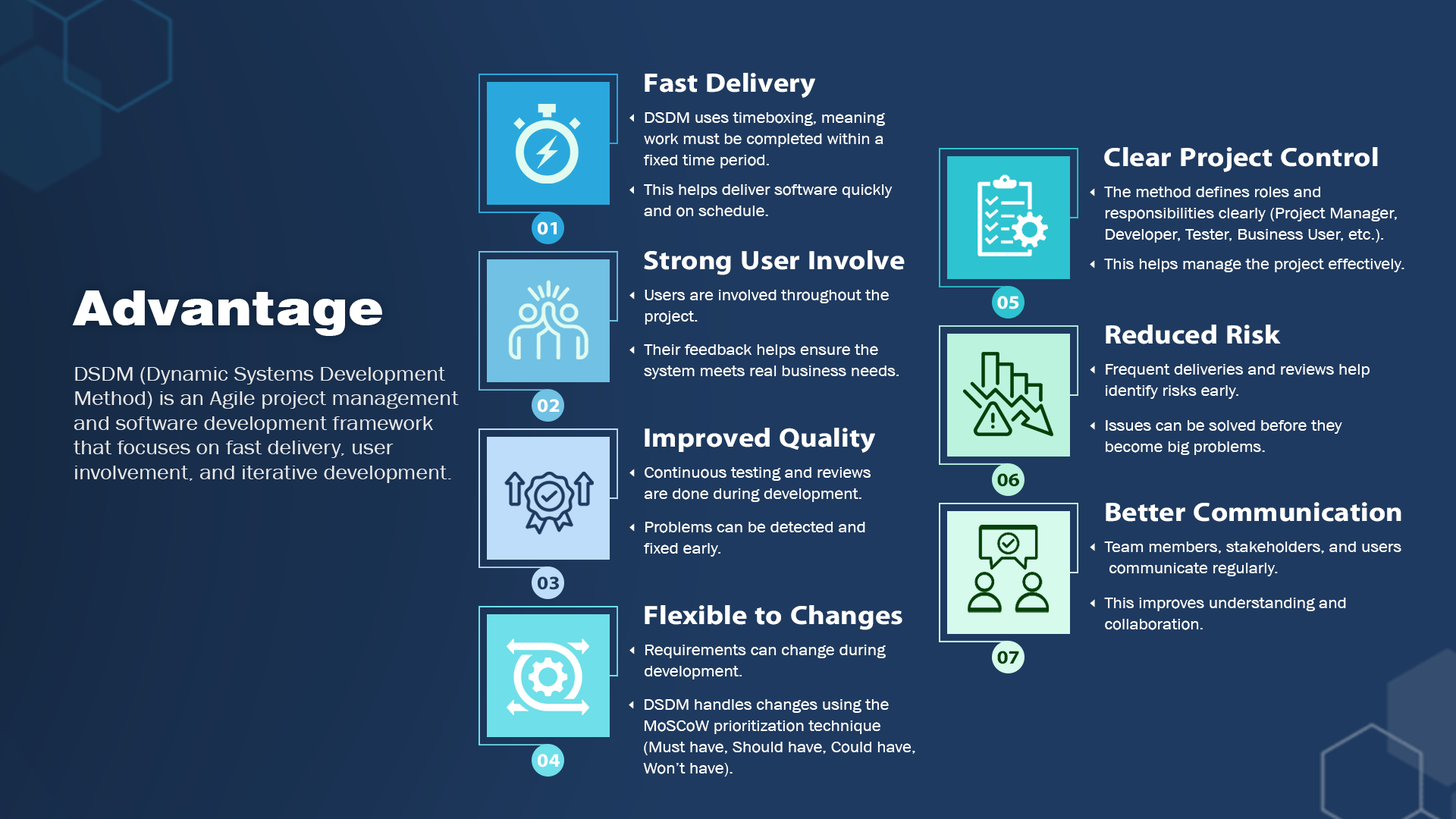
<style>
.page{position:relative;width:1456px;height:819px;background:#1e3a60}
.page>*{position:absolute;margin:0}
.t1{font:26.7px "iKampuchea001_O'Chrov";color:#ffffff;scale:1.1 1}
.t2{font:15.6px/21.2px "AA-Khmer-AngDaunPov";color:#ffffff;scale:1.1 1}
.t3{font:26.8px "iKampuchea001_O'Chrov";color:#ffffff;scale:1.1 1}
.t4{font:15.7px/21.3px "AA-Khmer-AngDaunPov";color:#ffffff;scale:1.1 1}
.t5{font:18.9px "iKampuchea001_O'Chrov";color:#ffffff;scale:1.1 1}
.t6{font:15.7px "AA-Khmer-AngDaunPov";color:#ffffff;scale:1.1 1}
.t7{font:48.5px "Swiss721BT-Black";color:#ffffff;scale:1.1 1}
.t8{font:20.5px "AA-Khmer-AngDaunPov";color:#ffffff;scale:1.1 1}
.t9{font:18.9px "iKampuchea001_O'Chrov";color:#063f09;scale:1.1 1}
.t10{font:18.9px "iKampuchea001_O'Chrov";color:#1e3a60;scale:1.1 1}
</style>
<div class="page">
<p class="t1" style="left:645px;top:73px;width:170px;height:25px">Fast Delivery</p>
<p class="t2" style="left:644px;top:112px;width:241px;height:56px">DSDM uses timeboxing, meaning <br>work must be completed within a <br>fixed time period.</p>
<p class="t3" style="left:1104px;top:147px;width:274px;height:25px">Clear Project Control</p>
<p class="t2" style="left:644px;top:184px;width:249px;height:33px">This helps deliver software quickly <br>and on schedule.</p>
<p class="t4" style="left:1104px;top:187px;width:293px;height:56px">The method defines roles and <br>responsibilities clearly (Project Manager, <br>Developer, Tester, Business User, etc.).</p>
<p class="t5" style="left:538px;top:221px;width:19px;height:14px">01</p>
<p class="t3" style="left:644px;top:250px;width:261px;height:25px">Strong User Involve</p>
<p class="t6" style="left:1104px;top:259px;width:300px;height:13px">This helps manage the project effectively.</p>
<p class="t7" style="left:72px;top:290px;width:310px;height:46px">Advantage</p>
<p class="t4" style="left:645px;top:290px;width:244px;height:35px">Users are involved throughout the <br>project.</p>
<p class="t5" style="left:997px;top:296px;width:22px;height:13px">05</p>
<p class="t3" style="left:1106px;top:325px;width:175px;height:19px">Reduced Risk</p>
<p class="t4" style="left:644px;top:344px;width:255px;height:35px">Their feedback helps ensure the <br>system meets real business needs.</p>
<p class="t4" style="left:1106px;top:364px;width:264px;height:35px">Frequent deliveries and reviews help <br>identify risks early.</p>
<p class="t8" style="left:74px;top:367px;width:385px;height:116px;opacity:0.86">DSDM (Dynamic Systems Development <br>Method) is an Agile project management <br>and software development framework <br>that focuses on fast delivery, user <br>involvement, and iterative development.</p>
<p class="t5" style="left:538px;top:399px;width:22px;height:14px">02</p>
<p class="t4" style="left:1106px;top:420px;width:236px;height:35px">Issues can be solved before they <br>become big problems.</p>
<p class="t3" style="left:645px;top:428px;width:230px;height:25px">Improved Quality</p>
<p class="t4" style="left:644px;top:467px;width:227px;height:35px">Continuous testing and reviews <br>are done during development.</p>
<p class="t9" style="left:997px;top:473px;width:22px;height:14px">06</p>
<p class="t3" style="left:1106px;top:502px;width:295px;height:20px">Better Communication</p>
<p class="t4" style="left:644px;top:522px;width:221px;height:35px">Problems can be detected and <br>fixed early.</p>
<p class="t4" style="left:1104px;top:541px;width:297px;height:35px">Team members, stakeholders, and users<br> communicate regularly.</p>
<p class="t10" style="left:538px;top:576px;width:21px;height:14px">03</p>
<p class="t3" style="left:645px;top:605px;width:257px;height:25px">Flexible to Changes</p>
<p class="t4" style="left:1104px;top:598px;width:242px;height:32px">This improves understanding and <br>collaboration.</p>
<p class="t4" style="left:645px;top:645px;width:241px;height:34px">Requirements can change during <br>development.</p>
<p class="t9" style="left:997px;top:651px;width:22px;height:13px">07</p>
<p class="t4" style="left:643px;top:699px;width:272px;height:78px">DSDM handles changes using the <br>MoSCoW prioritization technique <br>(Must have, Should have, Could have, <br>Won’t have).</p>
<p class="t5" style="left:538px;top:754px;width:22px;height:13px">04</p>
</div>
